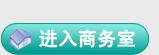
<style>
.page{position:relative;width:159px;height:55px;background:#ebeaeb}
.page>*{position:absolute;margin:0}
.t1{font:19px "SimHei";color:#ffffff;font-weight:bold}
</style>
<div class="page">
<p class="t1" style="left:39px;top:29px;width:96px;height:19px">进入商务室</p>
</div>
